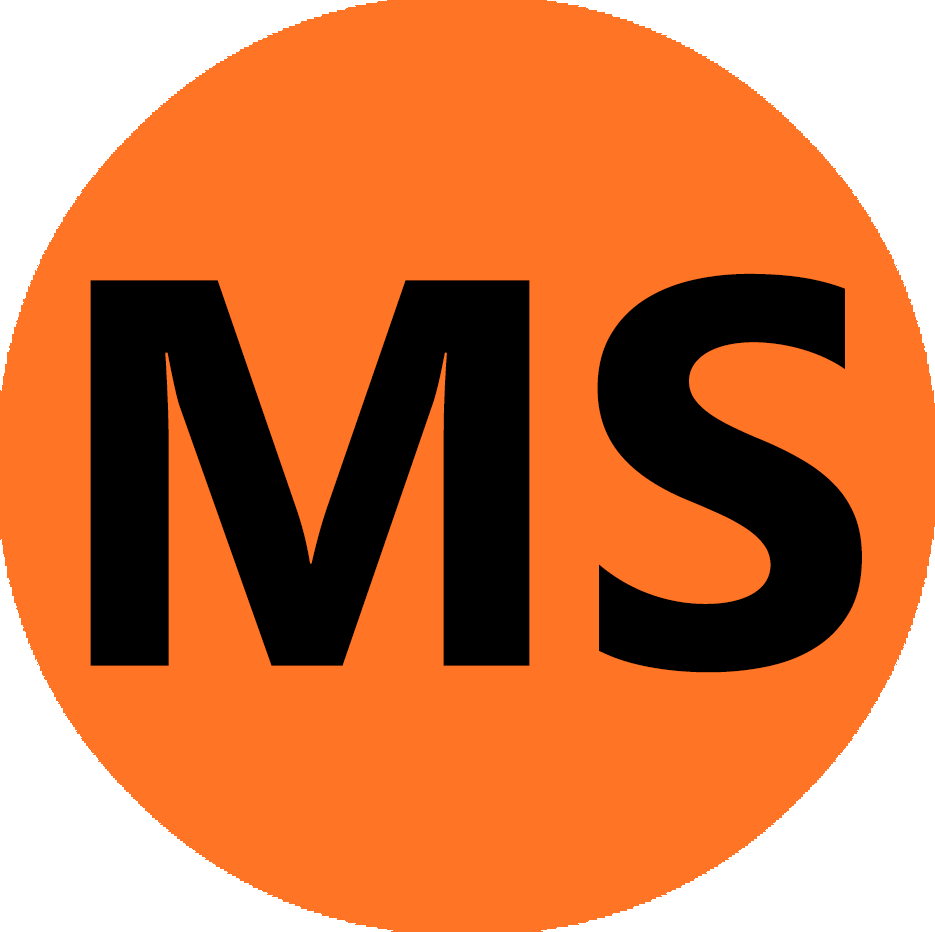
<style>
.page{position:relative;width:935px;height:932px;background:#ff7425}
.page>*{position:absolute;margin:0}
.t1{font:550px "Ebrima-Bold";color:#000000}
</style>
<div class="page">
<p class="t1" style="left:90px;top:273px;width:772px;height:400px">MS</p>
</div>
